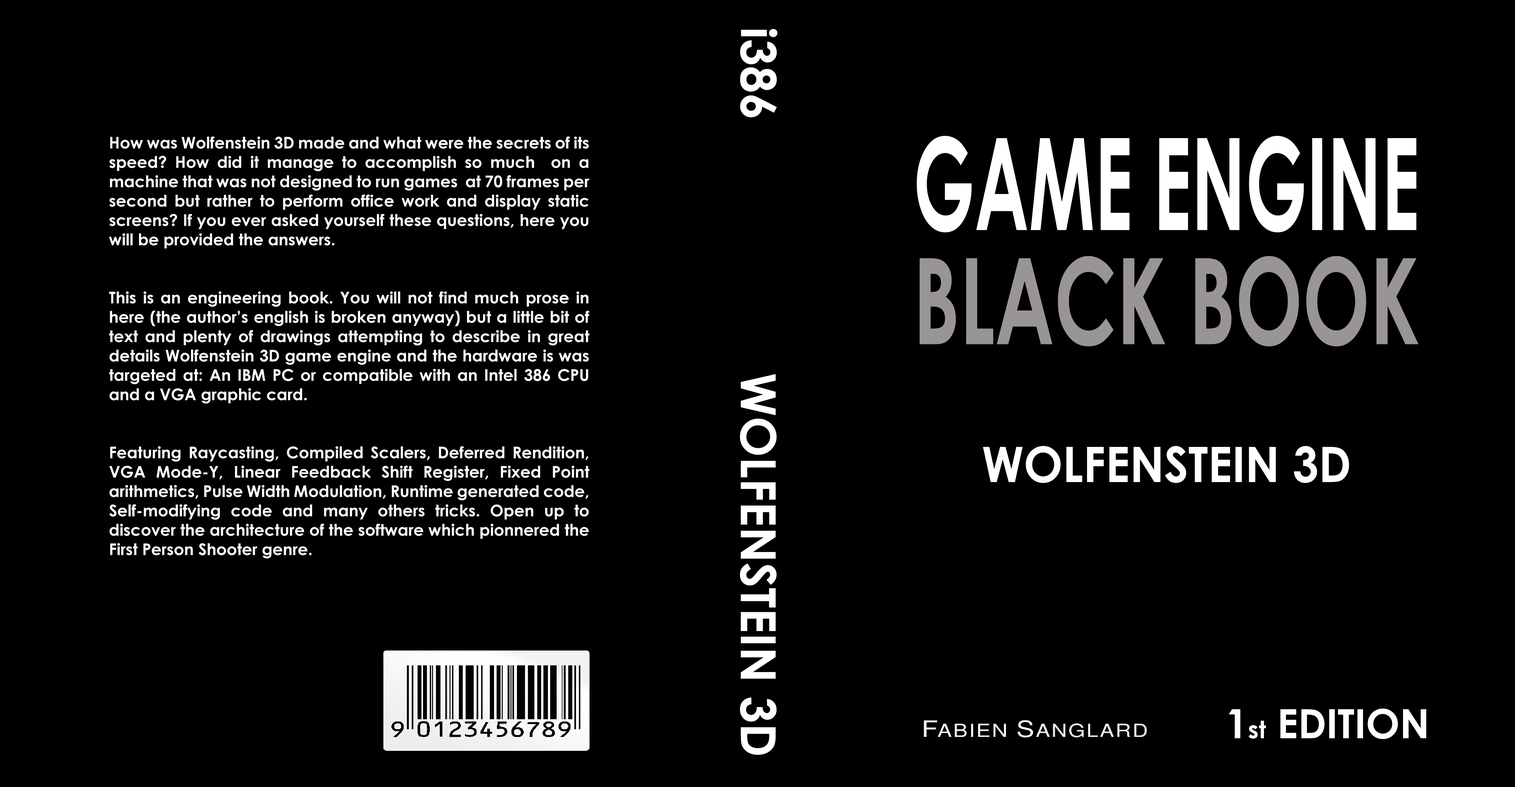
<style>
.page{position:relative;width:1515px;height:787px;background:#000000}
.page>*{position:absolute;margin:0}
.t1{font:48.4px "CenturyGothic-Bold";color:#ffffff}
.t2{font:16.1px "CenturyGothic-Bold";color:#ffffff}
.t3{font:127.9px "CenturyGothic-Bold";color:#ffffff;scale:0.57 1}
.t4{font:119.7px "CenturyGothic-Bold";color:#999595;scale:0.67 1}
.t5{font:48.9px "CenturyGothic-Bold";color:#ffffff;scale:0.95 1}
.t6{font:40.3px "CenturyGothic-Bold";color:#ffffff}
.t7{font:24.2px "CenturyGothic-Bold";color:#ffffff}
</style>
<div class="page">
<p class="t1" style="left:740px;top:29px;width:38px;height:88px;rotate:90deg">i386</p>
<p class="t2" style="left:109px;top:137px;width:481px;height:422px;text-align:justify">How was Wolfenstein 3D made and what were the secrets of its speed? How did it manage to accomplish so much  on a machine that was not designed to run games  at 70 frames per second but rather to perform office work and display static screens? If you ever asked yourself these questions, here you will be provided the answers.<br><br><br>This is an engineering book. You will not find much prose in here (the author’s english is broken anyway) but a little bit of text and plenty of drawings attempting to describe in great details Wolfenstein 3D game engine and the hardware is was targeted at: An IBM PC or compatible with an Intel 386 CPU and a VGA graphic card.<br><br><br>Featuring Raycasting, Compiled Scalers, Deferred Rendition, VGA Mode-Y, Linear Feedback Shift Register, Fixed Point arithmetics, Pulse Width Modulation, Runtime generated code, Self-modifying code and many others tricks. Open up to discover the architecture of the software which pionnered the First Person Shooter genre.</p>
<p class="t3" style="left:917px;top:136px;width:500px;height:96px">GAME ENGINE</p>
<p class="t4" style="left:920px;top:256px;width:499px;height:91px">BLACK BOOK</p>
<p class="t1" style="left:740px;top:374px;width:37px;height:381px;rotate:90deg">WOLFENSTEIN 3D</p>
<p class="t5" style="left:983px;top:446px;width:366px;height:37px">WOLFENSTEIN 3D</p>
<p class="t6" style="left:1229px;top:709px;width:197px;height:30px">1<span class="t7">st</span> EDITION</p>
</div>
